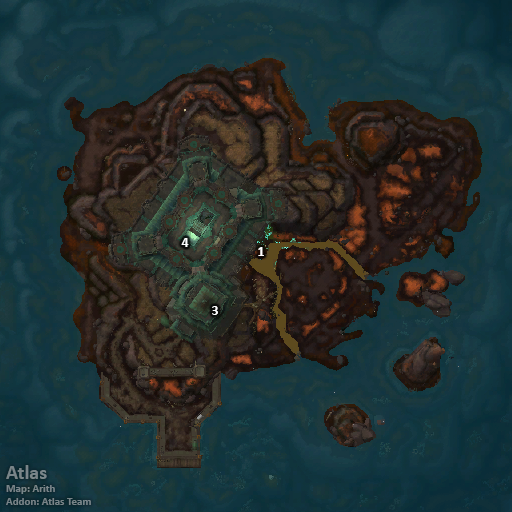
<style>
.page{position:relative;width:512px;height:512px}
.page>*{position:absolute;margin:0}
.t1{font:14px "Calibri-Bold";color:#ffffff}
.t2{font:11px "Calibri-Bold";color:#798489}
.t3{font:20px "Calibri-Bold";color:#798489}
</style>
<div class="page">
<p class="t1" style="left:181px;top:238px;width:8px;height:9px">4</p>
<p class="t1" style="left:258px;top:247px;width:6px;height:9px">1</p>
<p class="t1" style="left:212px;top:306px;width:6px;height:9px">3</p>
<p class="t2" style="left:6px;top:465px;width:85px;height:40px"><span class="t3">Atlas<br></span>Map: Arith<br>Addon: Atlas Team</p>
</div>
